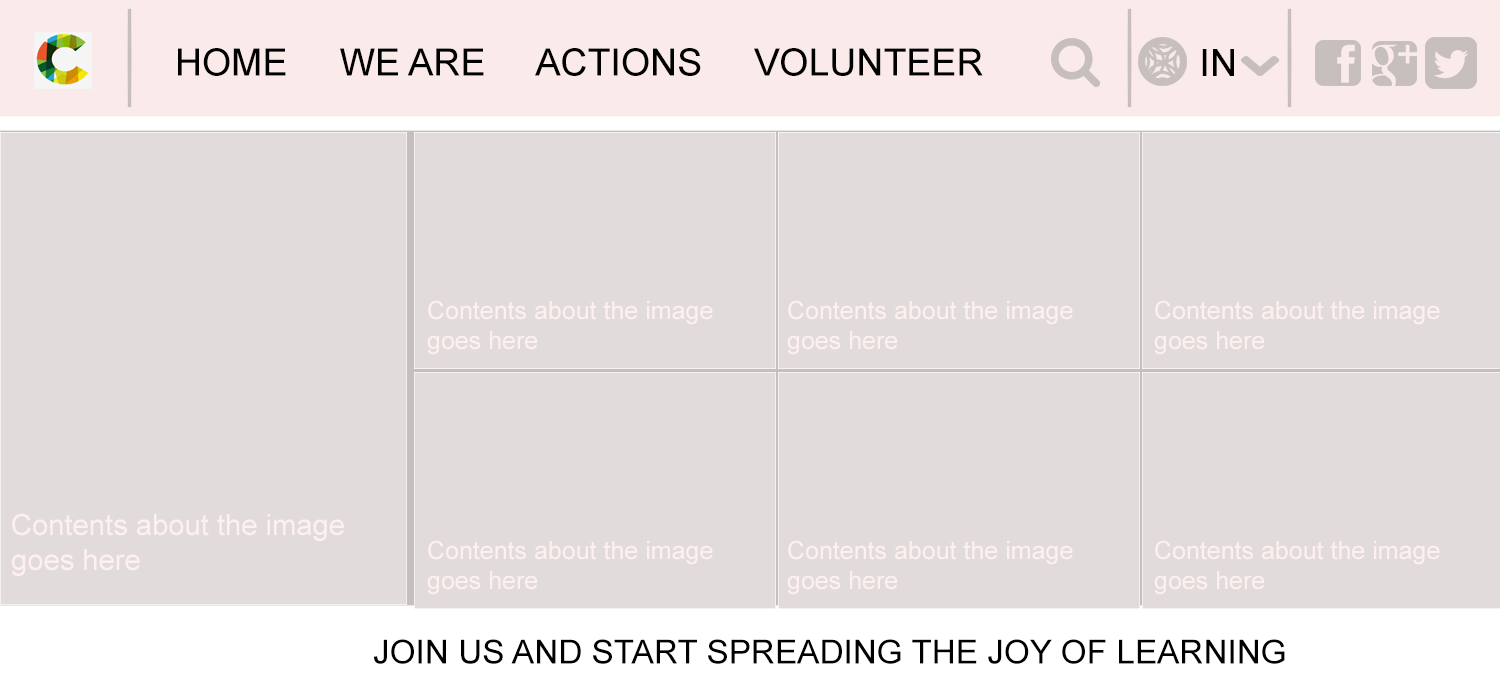
<style>
.page{position:relative;width:1500px;height:680px;background:#e1dcdb}
.page>*{position:absolute;margin:0}
.t1{font:37.5px "ArialMT";color:#000000}
.t2{font:25px "ArialMT";color:#fff0f0}
.t3{font:29.2px "ArialMT";color:#fff0f0}
.t4{font:33.3px "ArialMT";color:#000000}
</style>
<div class="page">
<p class="t1" style="left:178px;top:48px;width:805px;height:28px">HOME     WE ARE     ACTIONS     VOLUNTEER</p>
<p class="t1" style="left:1202px;top:49px;width:32px;height:27px">IN</p>
<p class="t2" style="left:427px;top:300px;width:286px;height:55px;text-align:right">Contents about the image<br>goes here</p>
<p class="t2" style="left:787px;top:300px;width:286px;height:55px;text-align:right">Contents about the image<br>goes here</p>
<p class="t2" style="left:1154px;top:300px;width:286px;height:55px;text-align:right">Contents about the image<br>goes here</p>
<p class="t3" style="left:12px;top:513px;width:332px;height:63px;text-align:right">Contents about the image<br>goes here</p>
<p class="t2" style="left:427px;top:540px;width:286px;height:55px;text-align:right">Contents about the image<br>goes here</p>
<p class="t2" style="left:787px;top:540px;width:286px;height:55px;text-align:right">Contents about the image<br>goes here</p>
<p class="t2" style="left:1154px;top:540px;width:286px;height:55px;text-align:right">Contents about the image<br>goes here</p>
<p class="t4" style="left:374px;top:639px;width:911px;height:25px">JOIN US AND START SPREADING THE JOY OF LEARNING</p>
</div>
